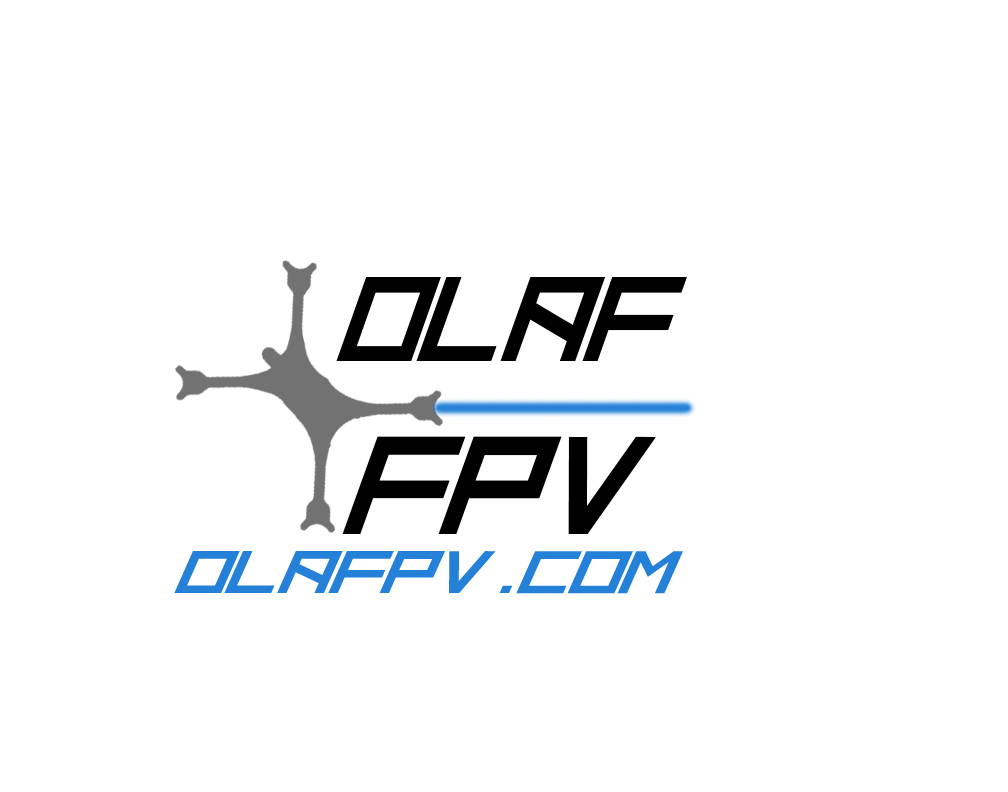
<style>
.page{position:relative;width:1008px;height:792px;background:#ffffff}
.page>*{position:absolute;margin:0}
.t1{font:120px "HBM-Ridge-Regular";color:#000000}
.t2{font:139.4px "HBM-Ridge-Regular";color:#000000}
.t3{font:60px "HBM-Ridge-Regular";color:#2481d7;scale:1.25 1}
</style>
<div class="page">
<p class="t1" style="left:336px;top:277px;width:351px;height:84px">olaf</p>
<p class="t2" style="left:342px;top:436px;width:314px;height:98px">FPV</p>
<p class="t3" style="left:174px;top:551px;width:509px;height:43px">olafpv.com</p>
</div>
